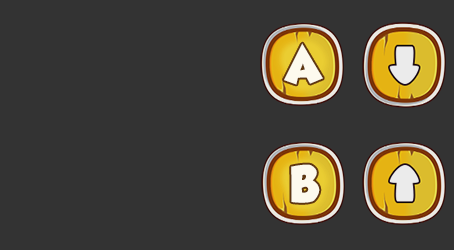
<style>
.page{position:relative;width:454px;height:250px;background:#333333}
.page>*{position:absolute;margin:0}
.t1{font:45.1px "GROBOLD";letter-spacing:-0.079em;color:#ffffff;scale:0.91 1}
</style>
<div class="page">
<p class="t1" style="left:284px;top:43px;width:39px;height:42px;opacity:0.89">A</p>
<p class="t1" style="left:291px;top:164px;width:29px;height:39px;opacity:0.89">B</p>
</div>
